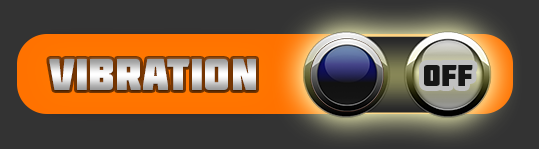
<style>
.page{position:relative;width:539px;height:149px;background:#333333}
.page>*{position:absolute;margin:0}
.t1{font:45px "Molot"}
.t2{font:30.7px "Molot";color:#161616}
</style>
<div class="page">
<p class="t1" style="left:49px;top:59px;width:207px;height:31px">Vibration</p>
<p class="t2" style="left:424px;top:65px;width:49px;height:21px">off</p>
</div>
